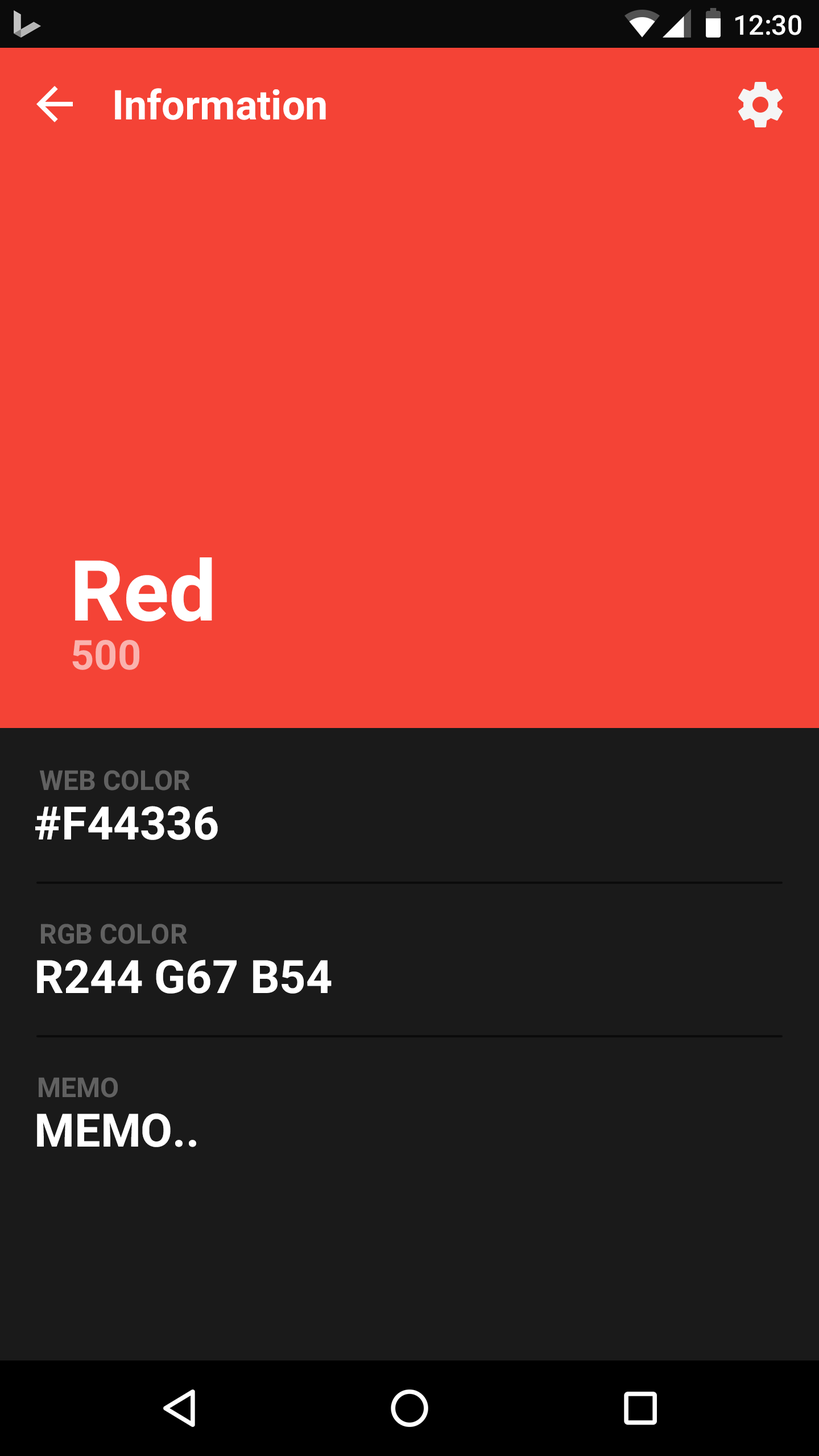
<style>
.page{position:relative;width:819px;height:1456px;background:#f44336}
.page>*{position:absolute;margin:0}
.t1{font:27.3px "Roboto-Medium";color:#ffffff}
.t2{font:40.9px "Roboto-Bold";color:#ffffff}
.t3{font:84.2px "Roboto-Bold";color:#ffffff}
.t4{font:40.9px "Roboto-Bold";color:#fab2ae}
.t5{font:27.3px "Roboto-Bold";color:#616161}
.t6{font:46.1px "Roboto-Bold";color:#ffffff}
</style>
<div class="page">
<p class="t1" style="left:735px;top:15px;width:66px;height:20px">12:30</p>
<p class="t2" style="left:115px;top:88px;width:211px;height:32px">Information</p>
<p class="t3" style="left:75px;top:557px;width:137px;height:65px">Red</p>
<p class="t4" style="left:72px;top:640px;width:67px;height:30px">500</p>
<p class="t5" style="left:39px;top:770px;width:151px;height:21px">WEB COLOR</p>
<p class="t6" style="left:35px;top:806px;width:183px;height:34px">#F44336</p>
<p class="t5" style="left:41px;top:924px;width:146px;height:20px">RGB COLOR</p>
<p class="t6" style="left:37px;top:959px;width:295px;height:35px">R244 G67 B54</p>
<p class="t5" style="left:39px;top:1077px;width:79px;height:21px">MEMO</p>
<p class="t6" style="left:37px;top:1113px;width:159px;height:34px">MEMO..</p>
</div>
